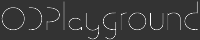
<style>
.page{position:relative;width:200px;height:40px;background:#333333}
.page>*{position:absolute;margin:0}
.t1{font:32.3px "Existence-Light";color:#ffffff}
</style>
<div class="page">
<p class="t1" style="left:1px;top:1px;width:197px;height:39px">ODPlayground</p>
</div>
